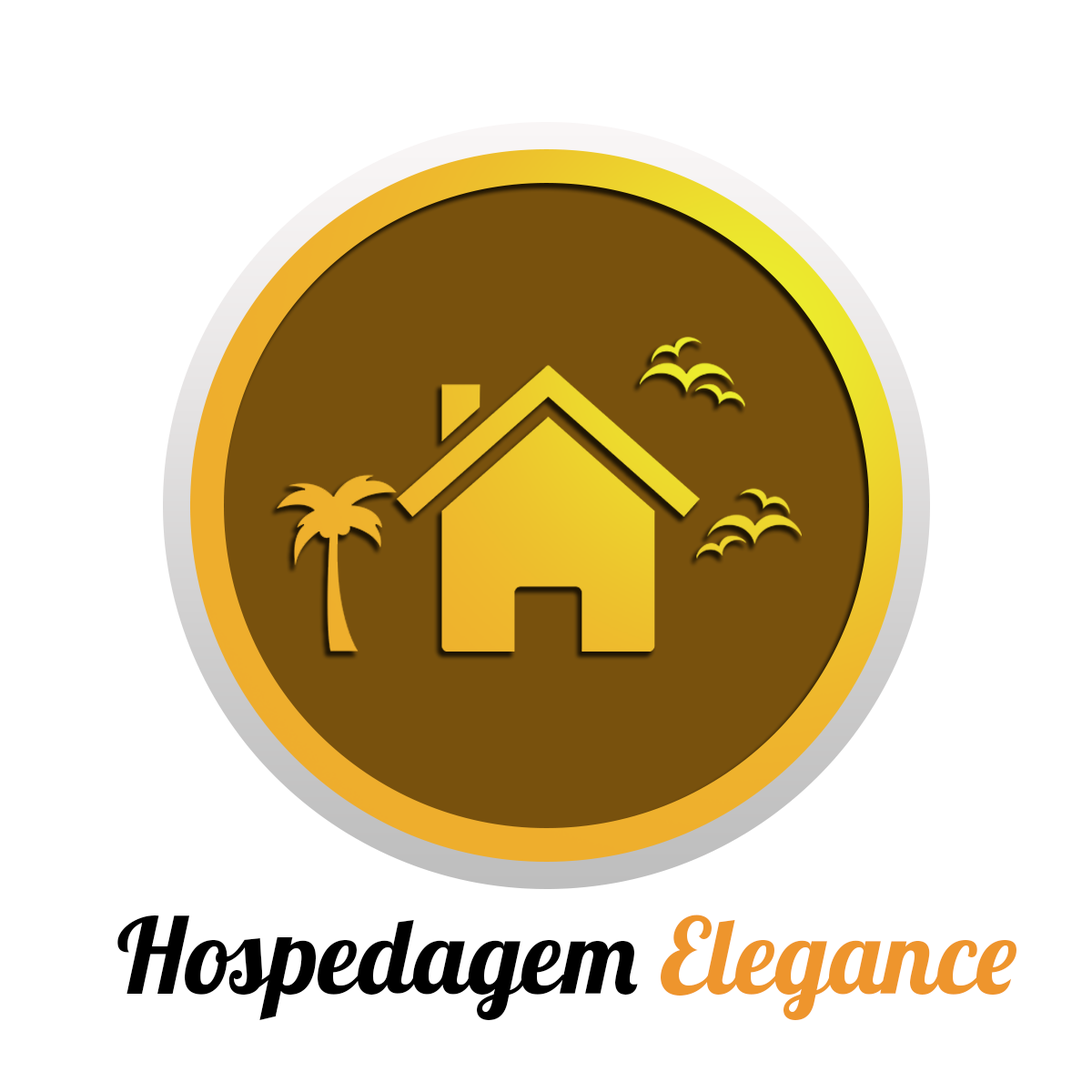
<style>
.page{position:relative;width:1092px;height:1092px;background:#ffffff}
.page>*{position:absolute;margin:0}
.t1{font:104.8px "Lobster1.4";color:#000000}
.t2{font:104.8px "Lobster1.4";color:#ee952d}
</style>
<div class="page">
<p class="t1" style="left:117px;top:915px;width:899px;height:105px">Hospedagem <span class="t2">Elegance</span></p>
</div>
